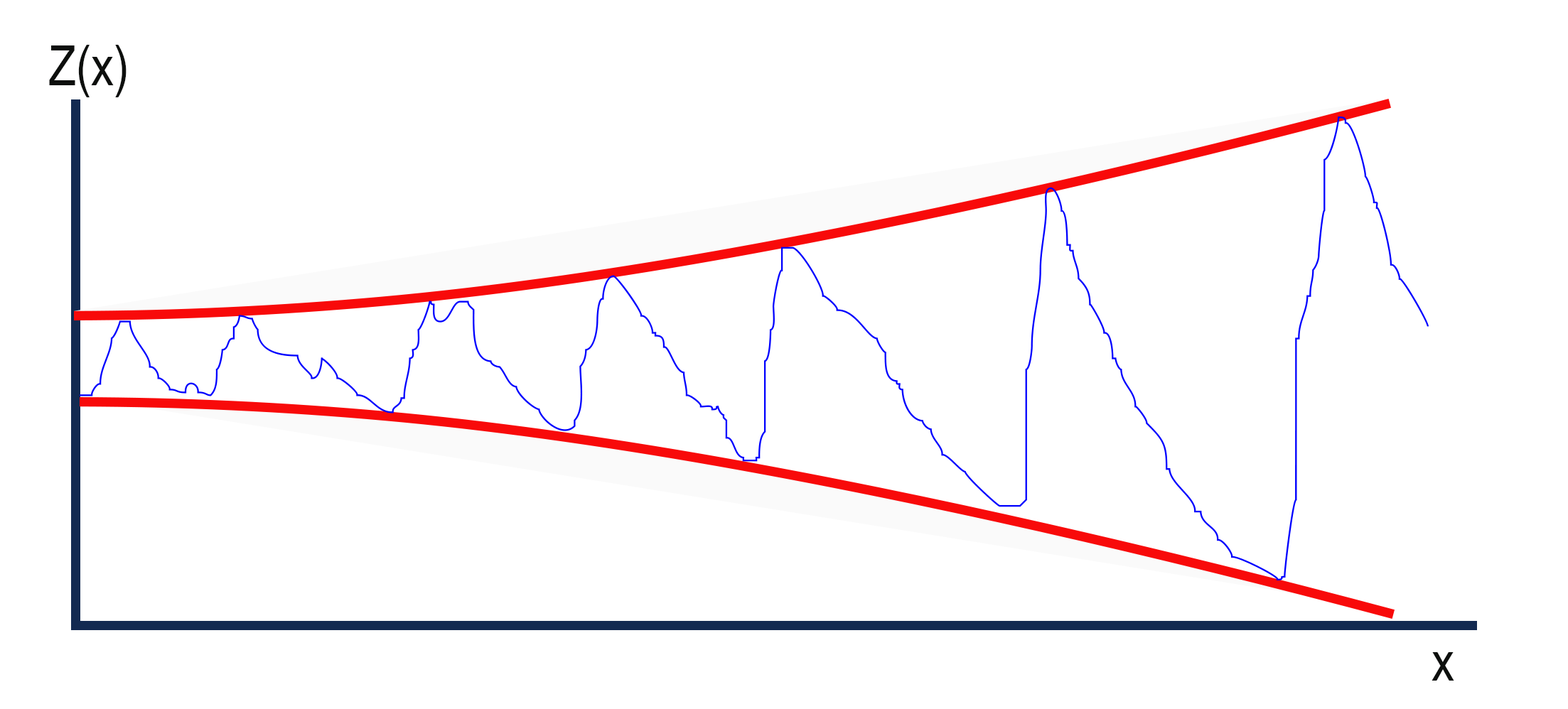
<style>
.page{position:relative;width:1568px;height:709px;background:#ffffff}
.page>*{position:absolute;margin:0}
.t1{font:94.8px "ArialNarrow";color:#0d0f0d}
</style>
<div class="page">
<p class="t1" style="left:49px;top:45px;width:78px;height:52px">Z(x)</p>
<p class="t1" style="left:1432px;top:653px;width:22px;height:28px">x</p>
</div>
